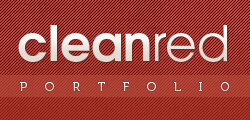
<style>
.page{position:relative;width:250px;height:120px}
.page>*{position:absolute;margin:0}
.t1{font:48.7px "TeXGyreAdventor-Bold";color:#ebe7e2}
.t2{font:48.7px "TeXGyreAdventor-Regular";color:#ebe7e2}
.t3{font:12px "Museo-300";letter-spacing:1.5em}
</style>
<div class="page">
<p class="t1" style="left:18px;top:25px;width:209px;height:37px">clean<span class="t2">red</span></p>
<p class="t3" style="left:20px;top:82px;width:210px;height:9px">PORTFOLIO</p>
</div>
